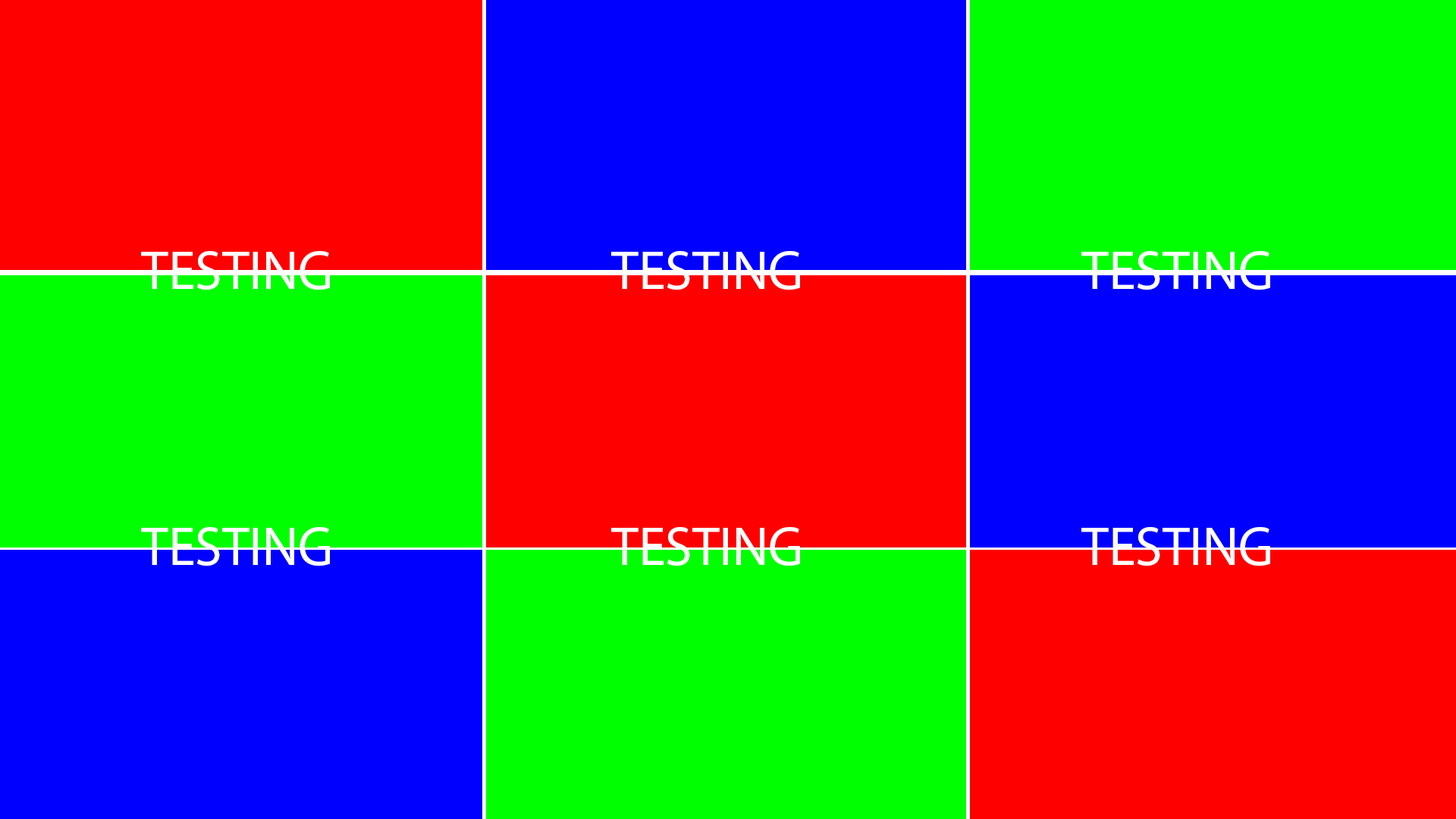
<style>
.page{position:relative;width:1456px;height:819px;background:#00ff00}
.page>*{position:absolute;margin:0}
.t1{font:54.6px "MyriadPro-Regular";color:#ffffff}
</style>
<div class="page">
<p class="t1" style="left:141px;top:251px;width:189px;height:39px">TESTING</p>
<p class="t1" style="left:611px;top:251px;width:189px;height:39px">TESTING</p>
<p class="t1" style="left:1081px;top:251px;width:189px;height:39px">TESTING</p>
<p class="t1" style="left:141px;top:527px;width:189px;height:39px">TESTING</p>
<p class="t1" style="left:611px;top:527px;width:189px;height:39px">TESTING</p>
<p class="t1" style="left:1081px;top:527px;width:189px;height:39px">TESTING</p>
</div>
